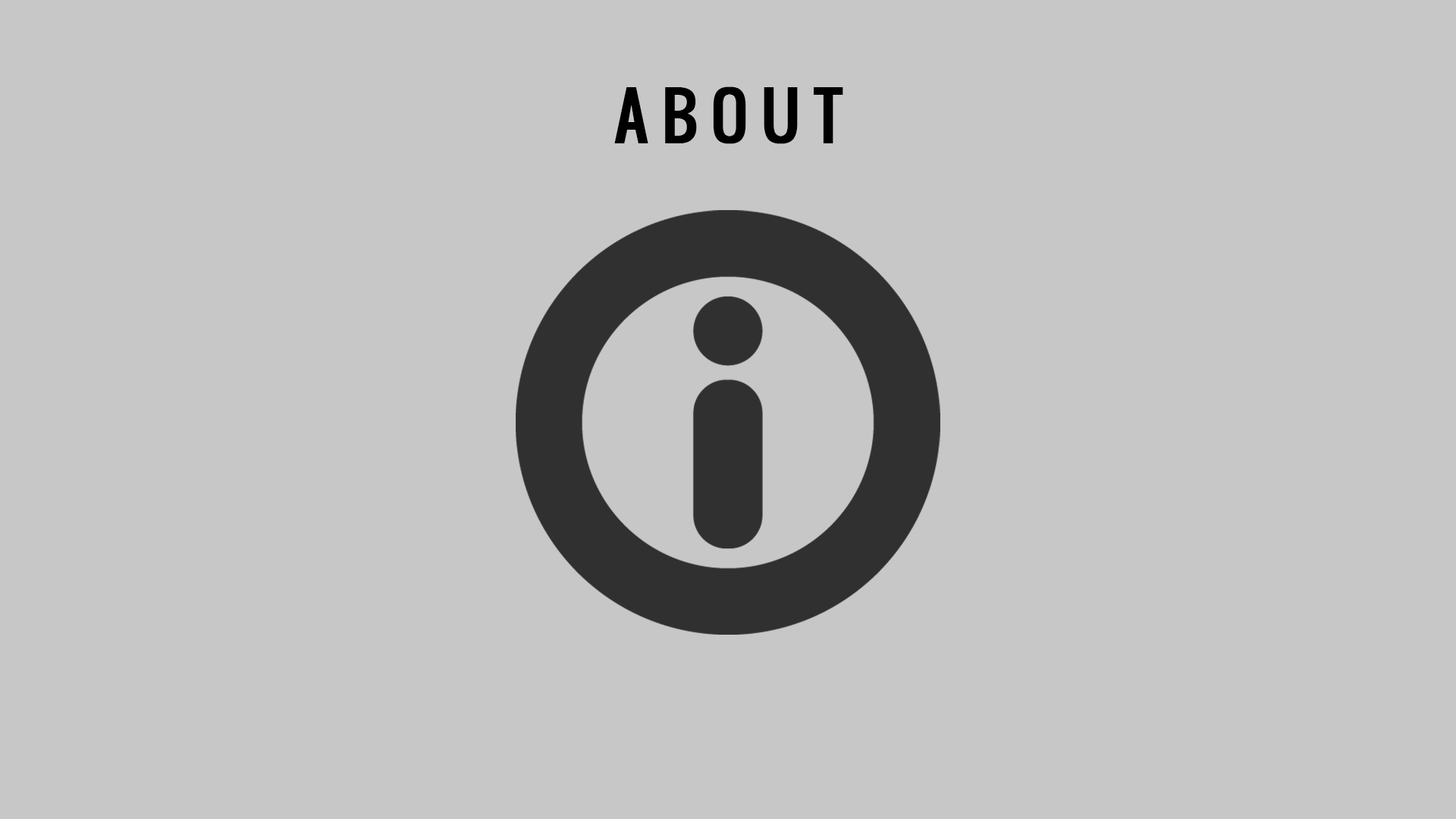
<style>
.page{position:relative;width:1456px;height:819px;background:#c7c7c7}
.page>*{position:absolute;margin:0}
.t1{font:89.6px "Oswald-Regular";letter-spacing:0.2em;color:#000000;font-variant:small-caps;font-weight:bold}
</style>
<div class="page">
<p class="t1" style="left:614px;top:86px;width:229px;height:58px">about</p>
</div>
